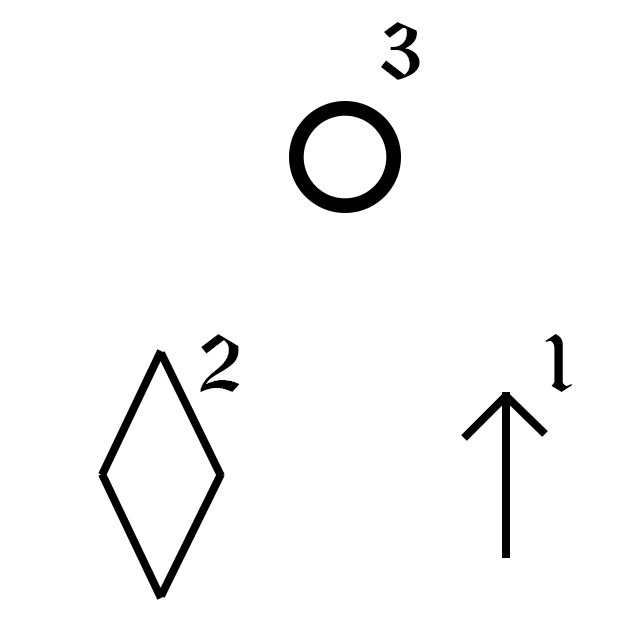
<style>
.page{position:relative;width:640px;height:640px;background:#ffffff}
.page>*{position:absolute;margin:0}
.t1{font:85px "OldEnglishTextMT";color:#000000}
</style>
<div class="page">
<p class="t1" style="left:381px;top:22px;width:39px;height:58px">3</p>
<p class="t1" style="left:200px;top:334px;width:40px;height:58px">2</p>
<p class="t1" style="left:545px;top:334px;width:28px;height:58px">1</p>
</div>
